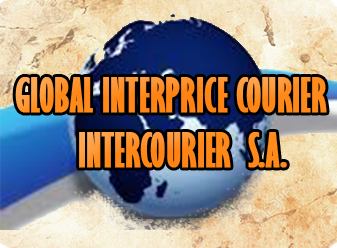
<style>
.page{position:relative;width:337px;height:248px}
.page>*{position:absolute;margin:0}
.t1{font:43.8px "GillSansMT-ExtraCondensedBold";color:#ff9926;font-weight:bold}
</style>
<div class="page">
<p class="t1" style="left:15px;top:77px;width:312px;height:36px">GLOBAL INTERPRICE COURIER</p>
<p class="t1" style="left:79px;top:132px;width:208px;height:36px">INTERCOURIER  S.A.</p>
</div>
